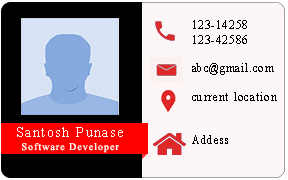
<style>
.page{position:relative;width:288px;height:180px;background:#fdf6f6}
.page>*{position:absolute;margin:0}
.t1{font:12px "TimesNewRomanPSMT";letter-spacing:0.1em;color:#000000;scale:0.93 1}
.t2{font:14px "TimesNewRomanPSMT";letter-spacing:0.1em;color:#fdf9f9}
.t3{font:10px "TimesNewRomanPSMT";letter-spacing:0.1em;color:#fdf9f9}
</style>
<div class="page">
<p class="t1" style="left:192px;top:20px;width:85px;height:124px">123-14258<br>123-42586<br><br>abc@gmail.com<br><br>current location<br><br><br>Addess</p>
<p class="t2" style="left:17px;top:127px;width:106px;height:10px">Santosh Punase</p>
<p class="t3" style="left:22px;top:143px;width:97px;height:10px">Software Developer</p>
</div>
